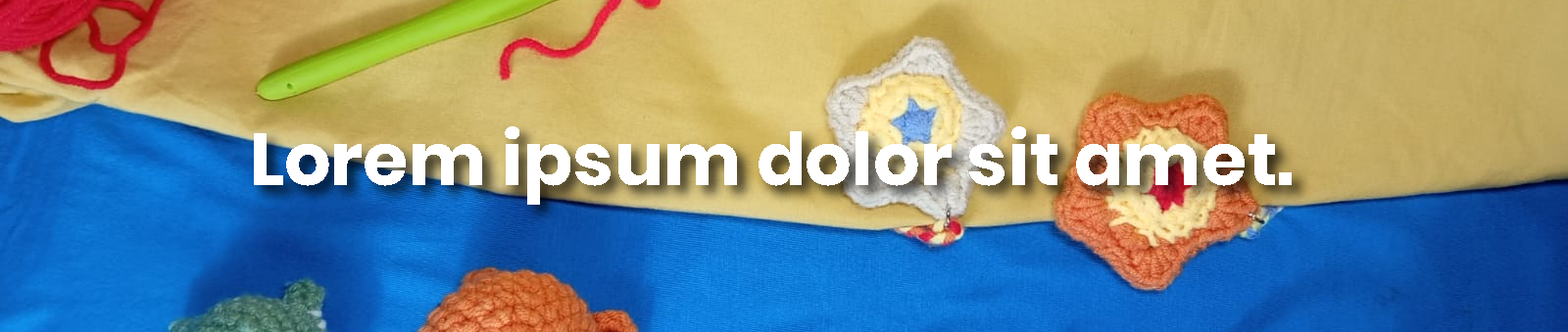
<style>
.page{position:relative;width:1568px;height:332px}
.page>*{position:absolute;margin:0}
.t1{font:73.1px "Poppins-Bold";color:#ffffff}
</style>
<div class="page">
<p class="t1" style="left:254px;top:126px;width:1038px;height:79px">Lorem ipsum dolor sit amet.</p>
</div>
